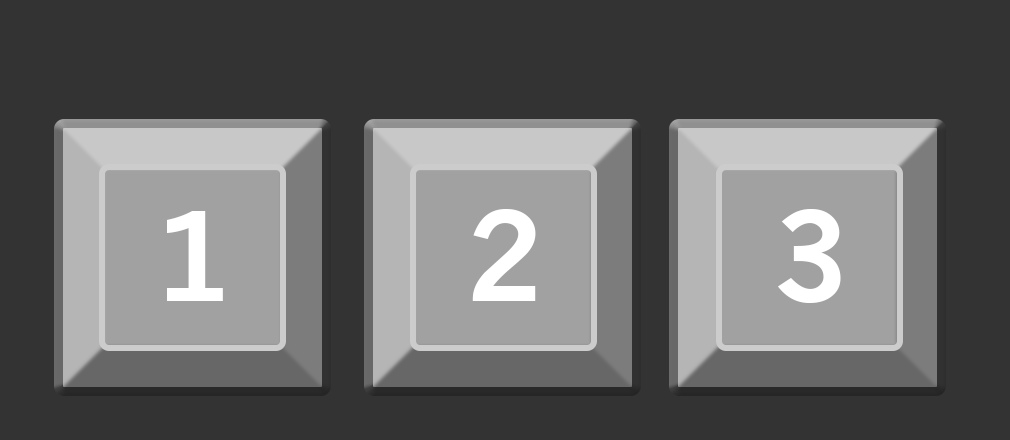
<style>
.page{position:relative;width:1010px;height:440px;background:#333333}
.page>*{position:absolute;margin:0}
.t1{font:120px "NewsGothic-Bold";color:#ffffff}
</style>
<div class="page">
<p class="t1" style="left:472px;top:209px;width:64px;height:92px">2</p>
<p class="t1" style="left:778px;top:209px;width:63px;height:94px">3</p>
<p class="t1" style="left:167px;top:211px;width:56px;height:90px">1</p>
</div>
